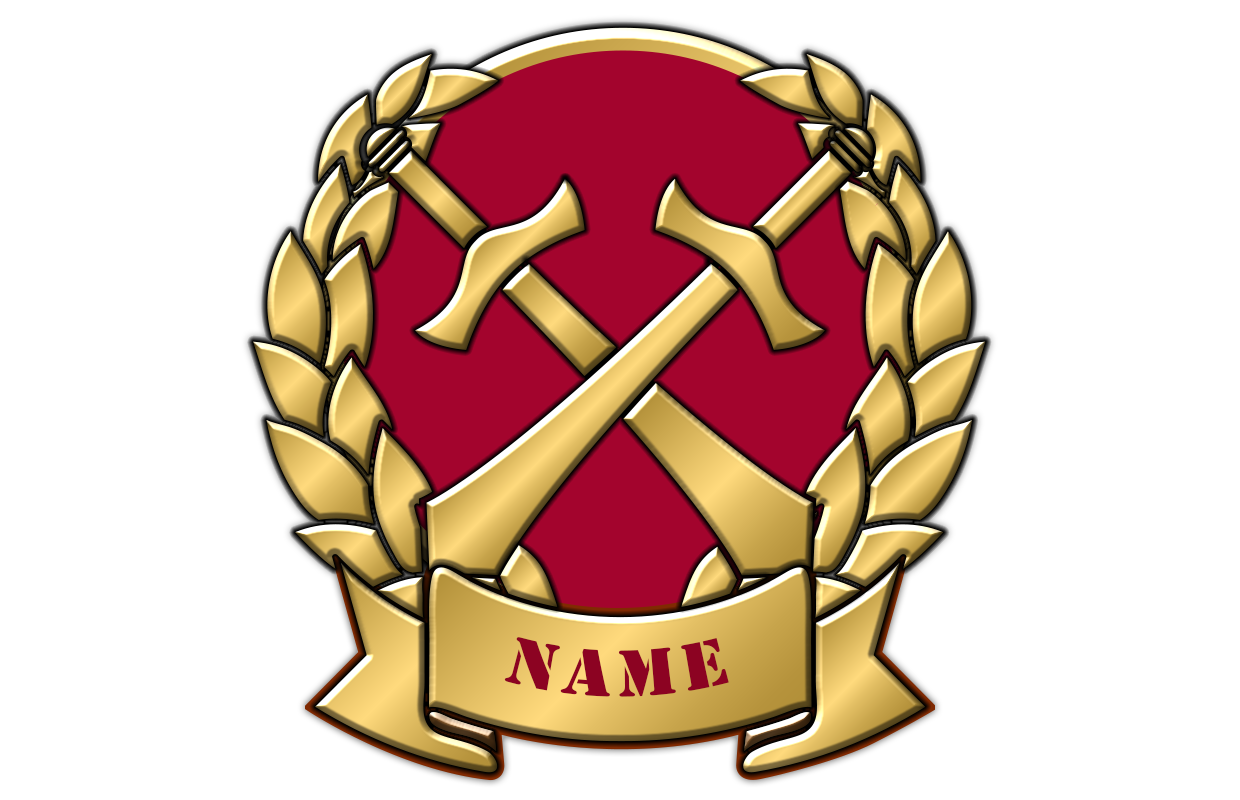
<style>
.page{position:relative;width:1240px;height:800px;background:#ffffff}
.page>*{position:absolute;margin:0}
.t1{font:68.6px "Stencil";letter-spacing:0.08em;color:#8c0322}
</style>
<div class="page">
<p class="t1" style="left:504px;top:637px;width:225px;height:60px">NAME</p>
</div>
